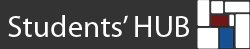
<style>
.page{position:relative;width:250px;height:49px;background:#333333}
.page>*{position:absolute;margin:0}
.t1{font:31.1px "MyriadPro-Regular";color:#ffffff}
</style>
<div class="page">
<p class="t1" style="left:8px;top:15px;width:181px;height:22px">Students’ HUB</p>
</div>
